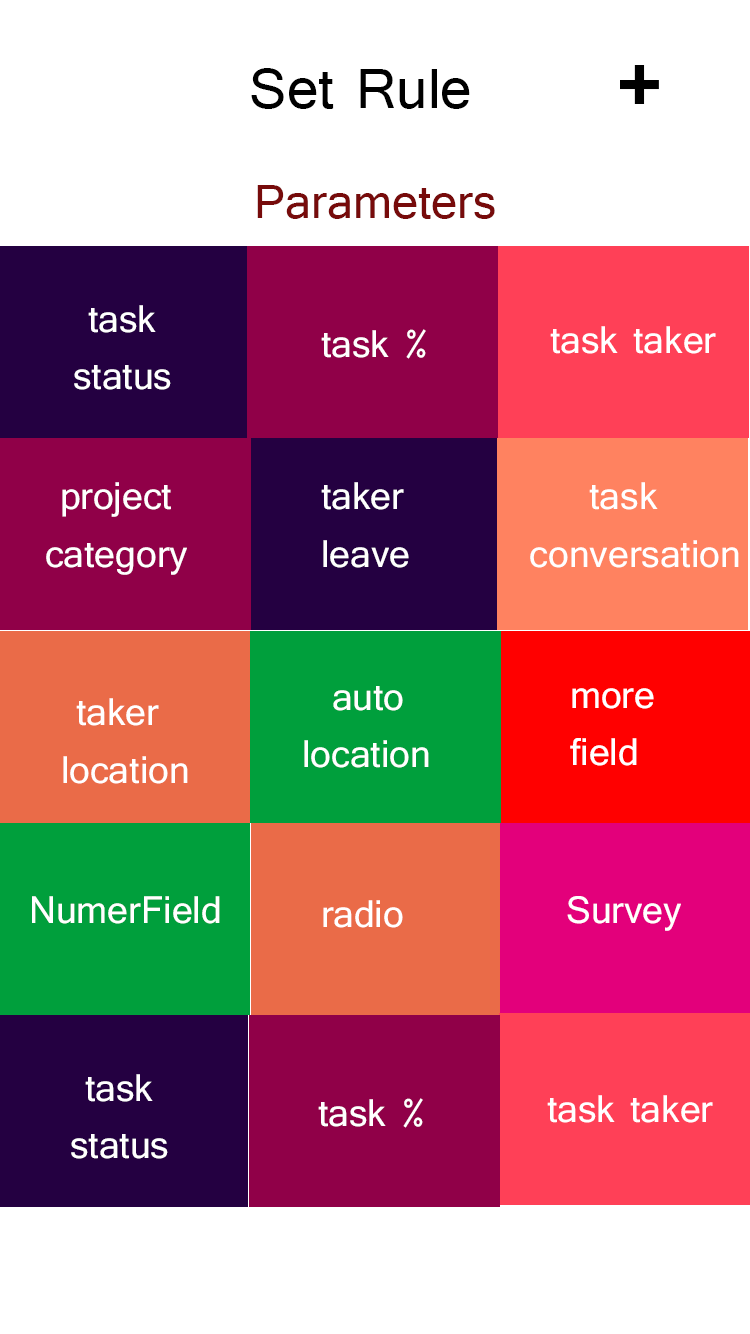
<style>
.page{position:relative;width:750px;height:1334px;background:#ffffff}
.page>*{position:absolute;margin:0}
.t1{font:103.1px "Tunga-Bold";color:#000000}
.t2{font:72px "Tunga";color:#000000}
.t3{font:60px "Tunga";color:#770b0b}
.t4{font:47.7px "Tunga";color:#ffffff}
</style>
<div class="page">
<p class="t1" style="left:620px;top:65px;width:39px;height:39px">+</p>
<p class="t2" style="left:251px;top:68px;width:219px;height:41px">Set Rule</p>
<p class="t3" style="left:257px;top:185px;width:238px;height:34px">Parameters</p>
<p class="t4" style="left:74px;top:305px;width:97px;height:85px">task <br>status</p>
<p class="t4" style="left:321px;top:329px;width:105px;height:30px">task %</p>
<p class="t4" style="left:550px;top:326px;width:166px;height:28px">task taker</p>
<p class="t4" style="left:46px;top:482px;width:141px;height:93px">project <br>category</p>
<p class="t4" style="left:321px;top:482px;width:88px;height:86px">taker <br> leave</p>
<p class="t4" style="left:530px;top:482px;width:209px;height:86px">task conversation</p>
<p class="t4" style="left:304px;top:686px;width:125px;height:82px">auto<br>location</p>
<p class="t4" style="left:570px;top:688px;width:84px;height:78px">more <br>field</p>
<p class="t4" style="left:63px;top:698px;width:125px;height:86px">taker <br>location</p>
<p class="t4" style="left:32px;top:896px;width:188px;height:28px">NumerField</p>
<p class="t4" style="left:323px;top:900px;width:80px;height:28px">radio</p>
<p class="t4" style="left:567px;top:896px;width:114px;height:35px">Survey</p>
<p class="t4" style="left:71px;top:1074px;width:97px;height:85px">task <br>status</p>
<p class="t4" style="left:547px;top:1095px;width:166px;height:28px">task taker</p>
<p class="t4" style="left:318px;top:1098px;width:105px;height:30px">task %</p>
</div>
